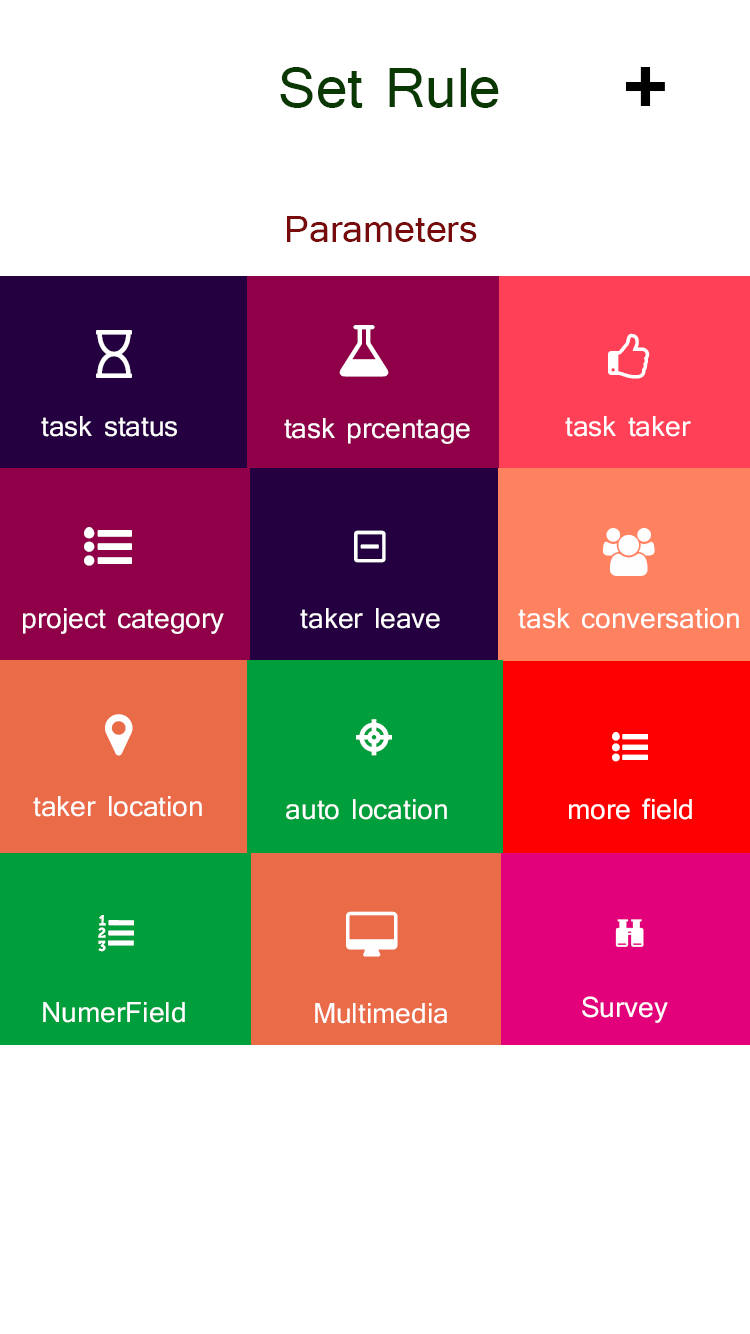
<style>
.page{position:relative;width:750px;height:1334px;background:#ffffff}
.page>*{position:absolute;margin:0}
.t1{font:72px "Tunga";color:#093803}
.t2{font:103.1px "Tunga-Bold";color:#000000}
.t3{font:48px "Tunga";color:#770b0b}
.t4{font:36px "Tunga";color:#ffffff}
</style>
<div class="page">
<p class="t1" style="left:280px;top:67px;width:219px;height:41px">Set Rule</p>
<p class="t2" style="left:626px;top:67px;width:39px;height:39px">+</p>
<p class="t3" style="left:287px;top:216px;width:190px;height:26px">Parameters</p>
<p class="t4" style="left:41px;top:416px;width:136px;height:21px">task status</p>
<p class="t4" style="left:284px;top:418px;width:186px;height:26px">task prcentage</p>
<p class="t4" style="left:565px;top:416px;width:126px;height:21px">task taker</p>
<p class="t4" style="left:23px;top:608px;width:201px;height:26px">project category</p>
<p class="t4" style="left:300px;top:608px;width:140px;height:21px">taker leave</p>
<p class="t4" style="left:518px;top:608px;width:221px;height:21px">task conversation</p>
<p class="t4" style="left:33px;top:796px;width:169px;height:21px">taker location</p>
<p class="t4" style="left:569px;top:798px;width:123px;height:22px">more field</p>
<p class="t4" style="left:286px;top:799px;width:161px;height:21px">auto location</p>
<p class="t4" style="left:582px;top:996px;width:86px;height:27px">Survey</p>
<p class="t4" style="left:43px;top:1002px;width:142px;height:21px">NumerField</p>
<p class="t4" style="left:315px;top:1003px;width:132px;height:21px">Multimedia</p>
</div>
